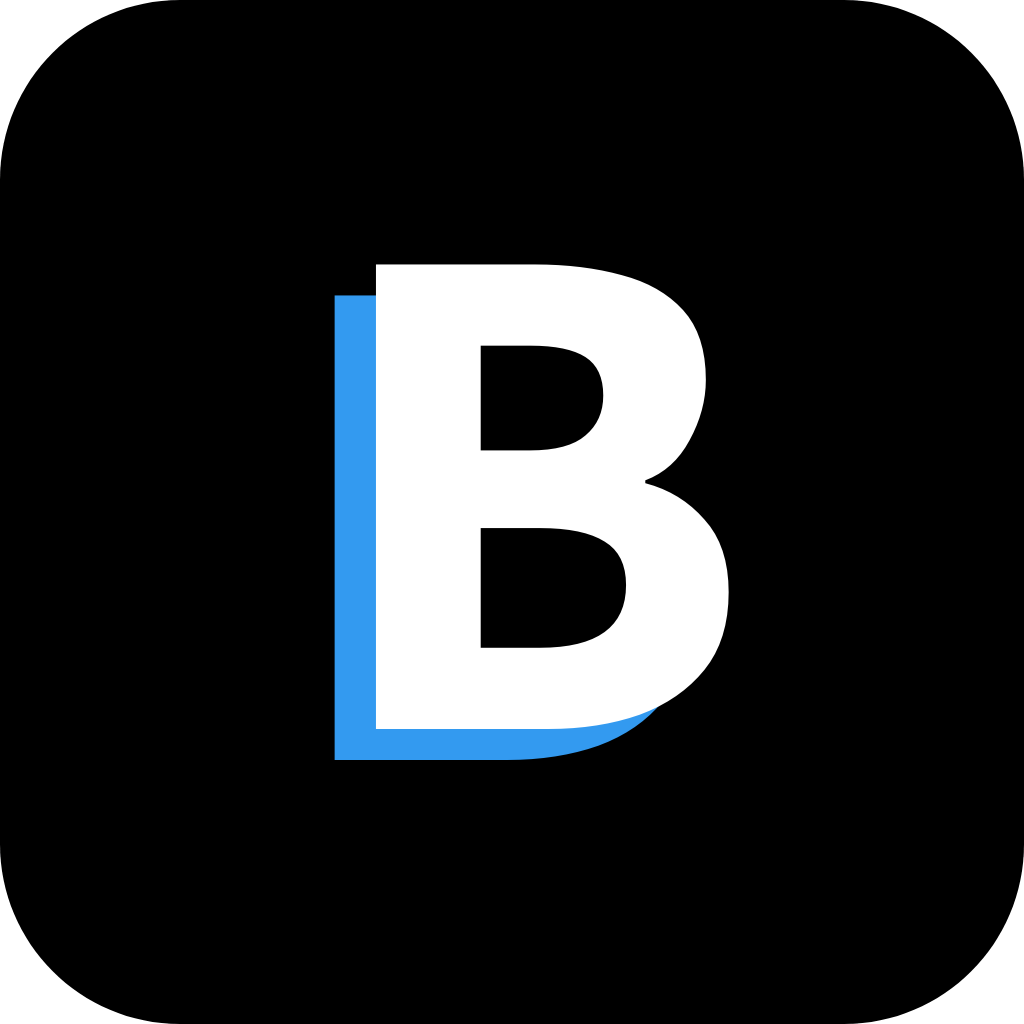
<style>
.page{position:relative;width:1024px;height:1024px;background:#000000}
.page>*{position:absolute;margin:0}
.t1{font:712.5px "SourceSansPro-Bold";color:#ffffff}
</style>
<div class="page">
<p class="t1" style="left:375px;top:264px;width:354px;height:465px">B</p>
</div>
